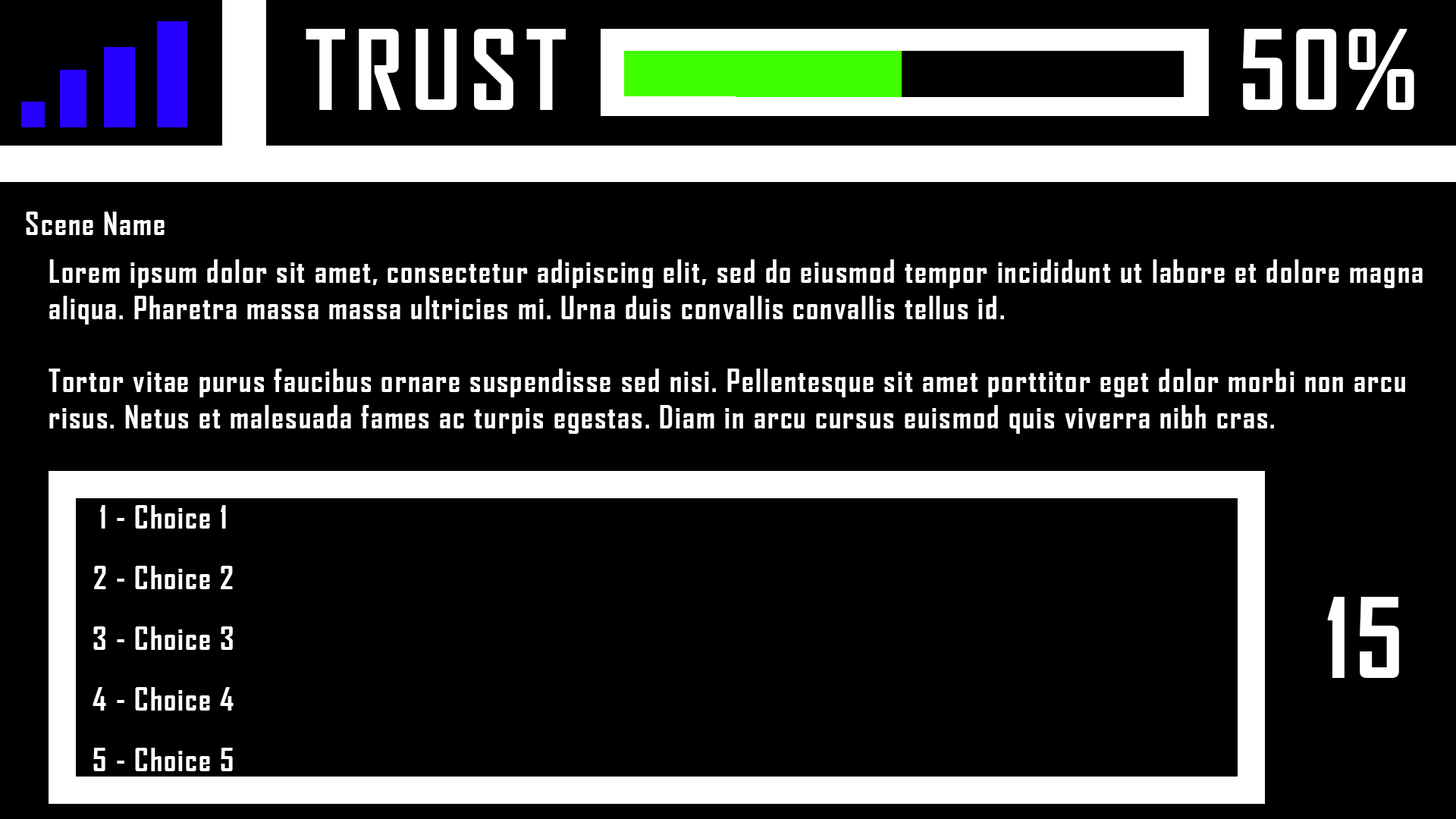
<style>
.page{position:relative;width:1456px;height:819px;background:#000000}
.page>*{position:absolute;margin:0}
.t1{font:106.2px "AgencyFB-Bold";letter-spacing:0.075em;color:#ffffff}
.t2{font:106.2px "AgencyFB-Bold";letter-spacing:0.05em;color:#ffffff}
.t3{font:30.3px "AgencyFB-Bold";letter-spacing:0.05em;color:#ffffff}
.t4{font:30.3px/60.7px "AgencyFB-Bold";letter-spacing:0.05em;color:#ffffff}
</style>
<div class="page">
<p class="t1" style="left:306px;top:29px;width:260px;height:81px">TRUST</p>
<p class="t2" style="left:1243px;top:29px;width:171px;height:81px">50%</p>
<p class="t3" style="left:26px;top:212px;width:139px;height:23px">Scene Name</p>
<p class="t3" style="left:49px;top:259px;width:1374px;height:175px">Lorem ipsum dolor sit amet, consectetur adipiscing elit, sed do eiusmod tempor incididunt ut labore et dolore magna <br>aliqua. Pharetra massa massa ultricies mi. Urna duis convallis convallis tellus id. <br><br>Tortor vitae purus faucibus ornare suspendisse sed nisi. Pellentesque sit amet porttitor eget dolor morbi non arcu <br>risus. Netus et malesuada fames ac turpis egestas. Diam in arcu cursus euismod quis viverra nibh cras.</p>
<p class="t4" style="left:93px;top:505px;width:141px;height:266px;text-align:center"><span class="t3">1 - </span>Choice 1<br>2 - Choice 2<br>3 - Choice 3<br>4 - Choice 4<br>5 - Choice 5</p>
<p class="t2" style="left:1327px;top:597px;width:72px;height:81px">15</p>
</div>
